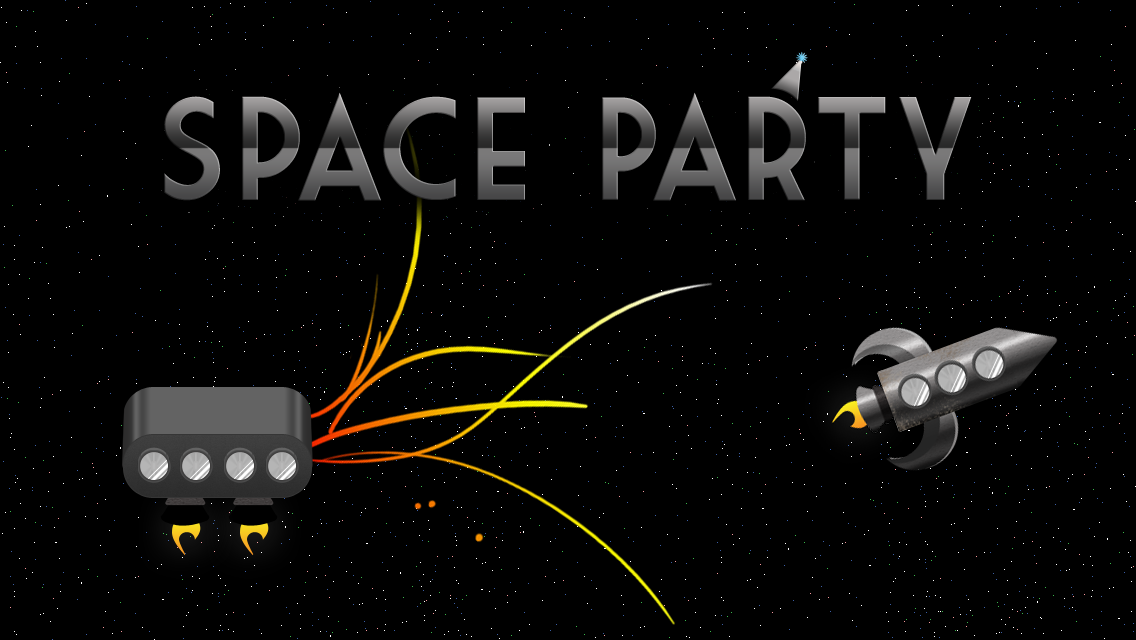
<style>
.page{position:relative;width:1136px;height:640px;background:#000000}
.page>*{position:absolute;margin:0}
.t1{font:142.6px "MarketDeco";letter-spacing:0.04em}
</style>
<div class="page">
<p class="t1" style="left:164px;top:92px;width:808px;height:109px">Space Party</p>
</div>
